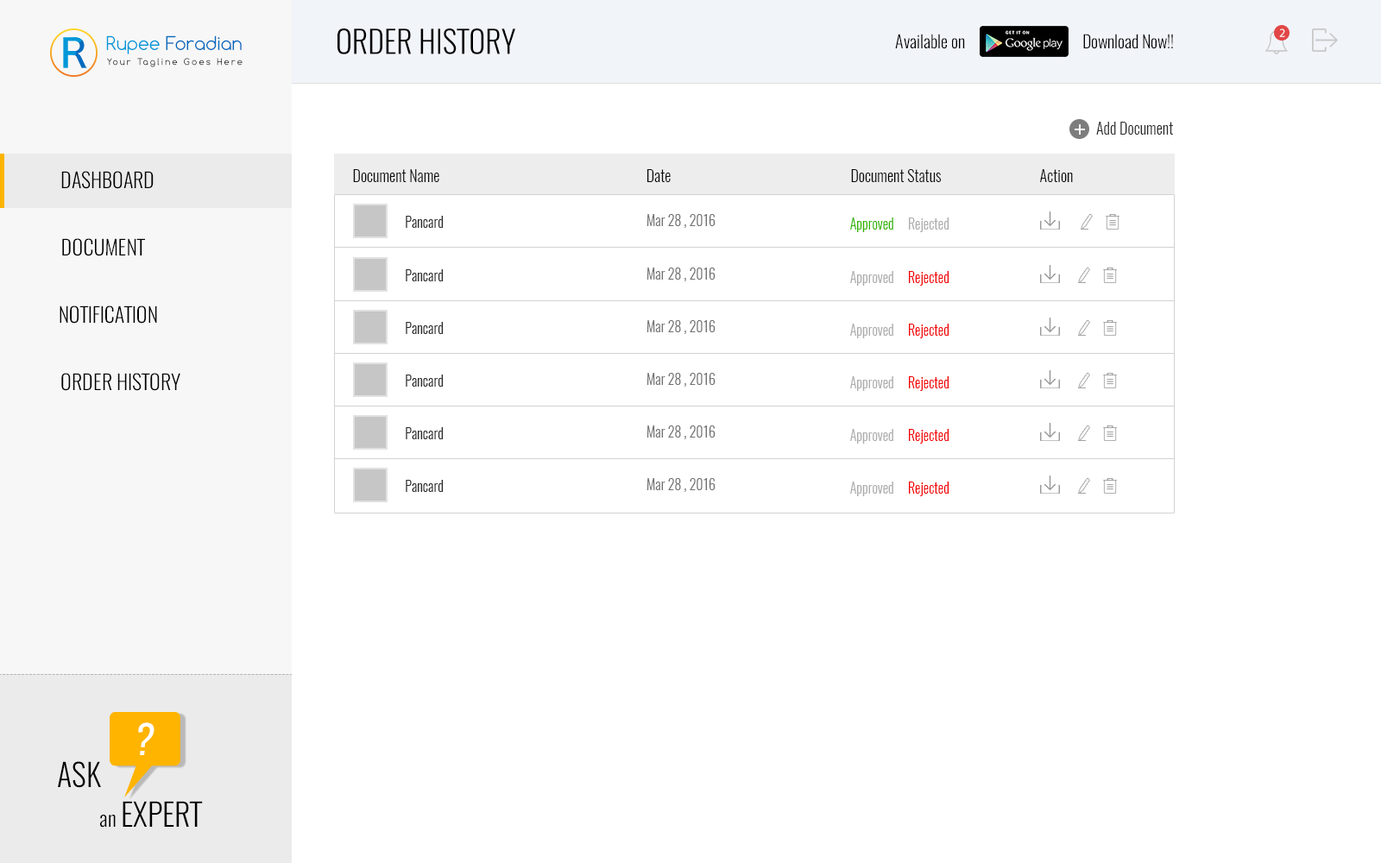
<style>
.page{position:relative;width:1381px;height:863px;background:#ffffff}
.page>*{position:absolute;margin:0}
.t1{font:31.1px "Oswald-Light";color:#000000;text-transform:uppercase}
.t2{font:12.1px "MyriadHebrew-Regular";color:#ffffff}
.t3{font:17.9px "Comfortaa";color:#026abf}
.t4{font:17.9px "Comfortaa";color:#0098d9}
.t5{font:8.6px "Comfortaa";letter-spacing:0.22em}
.t6{font:15.5px "Oswald-Light";color:#2a2a2a}
.t7{font:20.7px/67.3px "Oswald-Light";color:#000000;text-transform:uppercase}
.t8{font:15.5px "Oswald-Light";color:#0d0d0d}
.t9{font:15.5px "Oswald-Light";color:#0b0b0b}
.t10{font:13.8px "Oswald-Light";color:#2a2a2a}
.t11{font:13.8px "Oswald-Light";color:#717171}
.t12{font:13.8px "Oswald-Light";color:#33b600}
.t13{font:13.8px "Oswald-Light";color:#adadad}
.t14{font:13.8px "Oswald-Light";color:#f20000}
.t15{font:39.7px "Oswald-RegularItalic";color:#ffffff}
.t16{font:20.7px "Oswald-Light";color:#000000}
</style>
<div class="page">
<p class="t1" style="left:338px;top:28px;width:177px;height:26px">order History</p>
<p class="t2" style="left:1279px;top:28px;width:6px;height:9px">2</p>
<p class="t3" style="left:106px;top:35px;width:136px;height:19px"><span class="t4">Rupee </span>Foradian</p>
<p class="t5" style="left:107px;top:58px;width:136px;height:9px">Your Tagline Goes Here</p>
<p class="t6" style="left:1096px;top:122px;width:77px;height:13px">Add Document</p>
<p class="t7" style="left:60px;top:171px;width:120px;height:220px;text-align:right">dashboard<br>Document<br>Notification<br>order History</p>
<p class="t8" style="left:353px;top:169px;width:86px;height:13px">Document Name</p>
<p class="t9" style="left:647px;top:169px;width:24px;height:13px">Date</p>
<p class="t9" style="left:851px;top:169px;width:91px;height:13px">Document Status</p>
<p class="t9" style="left:1040px;top:169px;width:33px;height:13px">Action</p>
<p class="t10" style="left:406px;top:216px;width:38px;height:12px">Pancard</p>
<p class="t11" style="left:647px;top:214px;width:69px;height:14px">Mar 28 , 2016</p>
<p class="t12" style="left:850px;top:218px;width:100px;height:14px">Approved     <span class="t13">Rejected</span></p>
<p class="t10" style="left:406px;top:269px;width:38px;height:12px">Pancard</p>
<p class="t11" style="left:647px;top:268px;width:69px;height:13px">Mar 28 , 2016</p>
<p class="t13" style="left:850px;top:271px;width:100px;height:15px">Approved     <span class="t14">Rejected</span></p>
<p class="t10" style="left:406px;top:322px;width:38px;height:12px">Pancard</p>
<p class="t11" style="left:647px;top:320px;width:69px;height:14px">Mar 28 , 2016</p>
<p class="t13" style="left:850px;top:324px;width:100px;height:14px">Approved     <span class="t14">Rejected</span></p>
<p class="t10" style="left:406px;top:375px;width:38px;height:12px">Pancard</p>
<p class="t11" style="left:647px;top:373px;width:69px;height:14px">Mar 28 , 2016</p>
<p class="t13" style="left:850px;top:376px;width:100px;height:15px">Approved     <span class="t14">Rejected</span></p>
<p class="t11" style="left:647px;top:426px;width:69px;height:13px">Mar 28 , 2016</p>
<p class="t10" style="left:406px;top:427px;width:38px;height:12px">Pancard</p>
<p class="t13" style="left:850px;top:429px;width:100px;height:15px">Approved     <span class="t14">Rejected</span></p>
<p class="t10" style="left:406px;top:480px;width:38px;height:12px">Pancard</p>
<p class="t11" style="left:647px;top:478px;width:69px;height:14px">Mar 28 , 2016</p>
<p class="t13" style="left:850px;top:482px;width:100px;height:14px">Approved     <span class="t14">Rejected</span></p>
<p class="t15" style="left:138px;top:723px;width:17px;height:32px">?</p>
<p class="t1" style="left:58px;top:761px;width:43px;height:27px">Ask</p>
<p class="t1" style="left:100px;top:801px;width:103px;height:27px"><span class="t16">an </span>expert</p>
</div>
